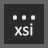
<style>
.page{position:relative;width:48px;height:48px;background:#2b2b2b}
.page>*{position:absolute;margin:0}
.t1{font:36px "Calibri";color:#e9e9e9}
.t2{font:18px "Calibri";color:#e9e9e9}
</style>
<div class="page">
<p class="t1" style="left:13px;top:15px;width:22px;height:5px">...</p>
<p class="t1" style="left:13px;top:15px;width:22px;height:5px">...</p>
<p class="t1" style="left:13px;top:15px;width:22px;height:5px">...</p>
<p class="t2" style="left:14px;top:23px;width:19px;height:13px">xsi</p>
</div>
